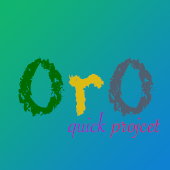
<style>
.page{position:relative;width:170px;height:170px}
.page>*{position:absolute;margin:0}
.t1{font:72px "Chalkduster";color:#006c00}
.t2{font:72px "Chalkduster";color:#dbbc13}
.t3{font:72px "Chalkduster";color:#4f5f6f}
.t4{font:30px "SavoyeLetPlain";color:#c71d75}
.t5{font:30px "SavoyeLetPlain";color:#9d1dc7}
</style>
<div class="page">
<p class="t1" style="left:18px;top:56px;width:137px;height:61px">O<span class="t2">r</span><span class="t3">O</span></p>
<p class="t4" style="left:67px;top:111px;width:93px;height:27px"><span class="t5">quick </span>projcet</p>
</div>
